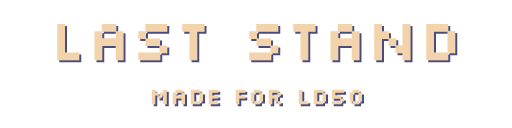
<style>
.page{position:relative;width:512px;height:128px;background:#ffffff}
.page>*{position:absolute;margin:0}
.t1{font:24px/44.1px "Silkscreen";color:#f2d3ab;font-weight:bold}
.t2{font:60px/44.1px "Silkscreen";color:#f2d3ab;font-weight:bold}
.t3{font:24px/44.1px "Silkscreen";font-weight:bold}
.t4{font:60px/44.1px "Silkscreen";font-weight:bold}
</style>
<div class="page">
<p class="t1" style="left:57px;top:24px;width:399px;height:81px;text-align:center"><span class="t2">Last Stand<br></span>Made for LD50</p>
<p class="t3" style="left:59px;top:26px;width:399px;height:81px;text-align:center"><span class="t4">Last Stand<br></span>Made for LD50</p>
</div>
